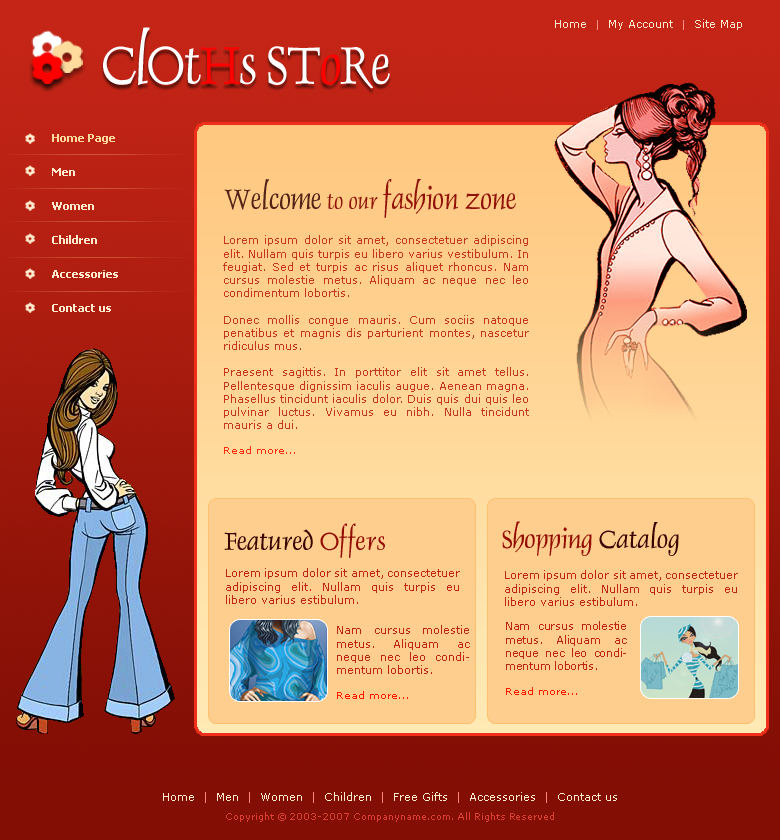
<style>
.page{position:relative;width:780px;height:840px}
.page>*{position:absolute;margin:0}
.t1{font:60.5px "DauphinPlain";letter-spacing:-0.025em;color:#ffffff;scale:0.91 1}
.t2{font:60.5px "DauphinPlain";letter-spacing:-0.025em;color:#ff0000;scale:0.91 1}
.t3{font:11px "Verdana";color:#fce8cd}
.t4{font:9px "Verdana";color:#ff9288}
.t5{font:11px/17px "Tahoma-Bold";color:#ffeace}
.t6{font:11px/17px "Tahoma-Bold";color:#ffda9d}
.t7{font:31.9px "DauphinPlain";color:#901208;scale:0.91 1}
.t8{font:31.9px "DauphinPlain";color:#532317;scale:0.91 1}
.t9{font:25.3px "DauphinPlain";color:#901208;scale:0.91 1}
.t10{font:11px "Verdana";color:#c12415}
.t11{font:10px "Verdana";color:#ff1700}
.t12{font:28px "DauphinPlain";color:#930d01}
.t13{font:28px "DauphinPlain";color:#390500}
.t14{font:11px "Verdana";letter-spacing:-0.025em;color:#c12415}
.t15{font:9px/19px "Verdana";color:#d94031}
.t16{font:11px/19px "Verdana";color:#ffeace}
.t17{font:11px/19px "Verdana";color:#fc8579}
</style>
<div class="page">
<p class="t1" style="left:103px;top:27px;width:287px;height:62px">ClOt<span class="t2">H</span>s ST<span class="t2">o</span>Re</p>
<p class="t3" style="left:555px;top:19px;width:187px;height:11px">Home  <span class="t4">|</span>  My Account  <span class="t4">|</span>  Site Map</p>
<p class="t5" style="left:52px;top:134px;width:66px;height:178px"><span class="t6">Home Page<br><br></span>Men<br><br>Women<br><br>Children<br><br>Accessories<br><br>Contact us</p>
<p class="t7" style="left:224px;top:179px;width:292px;height:39px"><span class="t8">Welcome</span><span class="t9"> to our </span>fashion zone</p>
<p class="t10" style="left:223px;top:235px;width:306px;height:219px;text-align:justify;opacity:0.9">Lorem ipsum dolor sit amet, consectetuer adipiscing elit. Nullam quis turpis eu libero varius vestibulum. In feugiat. Sed et turpis ac risus aliquet rhoncus. Nam cursus molestie metus. Aliquam ac neque nec leo condimentum lobortis. <br><br>Donec mollis congue mauris. Cum sociis natoque penatibus et magnis dis parturient montes, nascetur ridiculus mus.<br><br>Praesent sagittis. In porttitor elit sit amet tellus.Pellentesque dignissim iaculis augue. Aenean magna. Phasellus tincidunt iaculis dolor. Duis quis dui quis leo pulvinar luctus. Vivamus eu nibh. Nulla tincidunt mauris a dui.<br><br><span class="t11">Read more...</span></p>
<p class="t12" style="left:502px;top:521px;width:177px;height:35px">Shopping <span class="t13">Catalog</span></p>
<p class="t13" style="left:224px;top:523px;width:161px;height:35px">Featured<span class="t12"> Offers</span></p>
<p class="t10" style="left:226px;top:568px;width:234px;height:36px;text-align:justify">Lorem ipsum dolor sit amet, consectetuer adipiscing elit. Nullam quis turpis eu libero varius estibulum.</p>
<p class="t10" style="left:505px;top:570px;width:233px;height:36px;text-align:justify">Lorem ipsum dolor sit amet, consectetuer adipiscing elit. Nullam quis turpis eu libero varius estibulum.</p>
<p class="t10" style="left:337px;top:625px;width:133px;height:74px;text-align:justify">Nam cursus molestie metus. Aliquam ac neque nec leo condimentum lobortis.<br><br><span class="t11">Read more...</span></p>
<p class="t14" style="left:506px;top:621px;width:121px;height:74px;text-align:justify">Nam cursus molestie metus. Aliquam ac neque nec leo condimentum lobortis.<br><br><span class="t11">Read more...</span></p>
<p class="t15" style="left:163px;top:792px;width:454px;height:30px;text-align:center"><span class="t16">Home  </span><span class="t17">|</span><span class="t16">  Men  </span><span class="t17">| </span><span class="t16"> Women  </span><span class="t17">|</span><span class="t16">  Children  </span><span class="t17">|</span><span class="t16">  Free Gifts  </span><span class="t17">|</span><span class="t16">  Accessories  </span><span class="t17">|</span><span class="t16">  Contact us<br></span>Copyright © 2003-2007 Companyname.com. All Rights Reserved</p>
</div>
